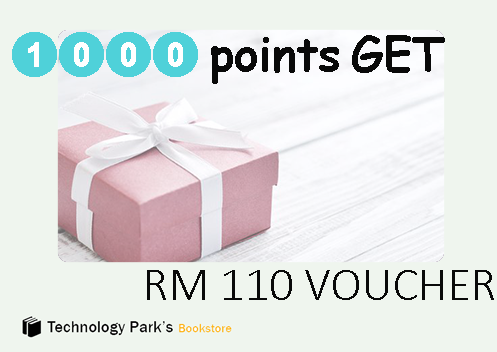
<style>
.page{position:relative;width:497px;height:352px;background:#eff5ee}
.page>*{position:absolute;margin:0}
.t1{font:47px "ComicSansMS-Bold"}
.t2{font:47px "EmojiOneColor"}
.t3{font:48px "Calibri-Light";color:#090909}
</style>
<div class="page">
<p class="t1" style="left:12px;top:32px;width:433px;height:52px"><span class="t2">1000 </span>points GET</p>
<p class="t3" style="left:147px;top:270px;width:347px;height:30px">RM 110 VOUCHER</p>
</div>
